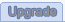
<style>
.page{position:relative;width:65px;height:22px;background:#d2ddf1}
.page>*{position:absolute;margin:0}
.t1{font:12px "ArialMT";color:#949494;font-weight:bold}
</style>
<div class="page">
<p class="t1" style="left:9px;top:6px;width:48px;height:13px">Upgrade</p>
</div>
